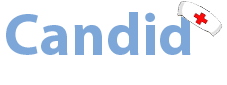
<style>
.page{position:relative;width:227px;height:85px;background:#ffffff}
.page>*{position:absolute;margin:0}
.t1{font:60px "MyriadHebrew-Bold";color:#7da7d8}
</style>
<div class="page">
<p class="t1" style="left:6px;top:12px;width:185px;height:43px">Candid</p>
</div>
